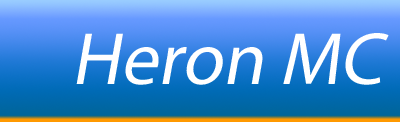
<style>
.page{position:relative;width:400px;height:122px}
.page>*{position:absolute;margin:0}
.t1{font:74.7px "MyriadPro-Regular";color:#ffffff;font-style:italic}
</style>
<div class="page">
<p class="t1" style="left:76px;top:33px;width:313px;height:52px">Heron MC</p>
</div>
